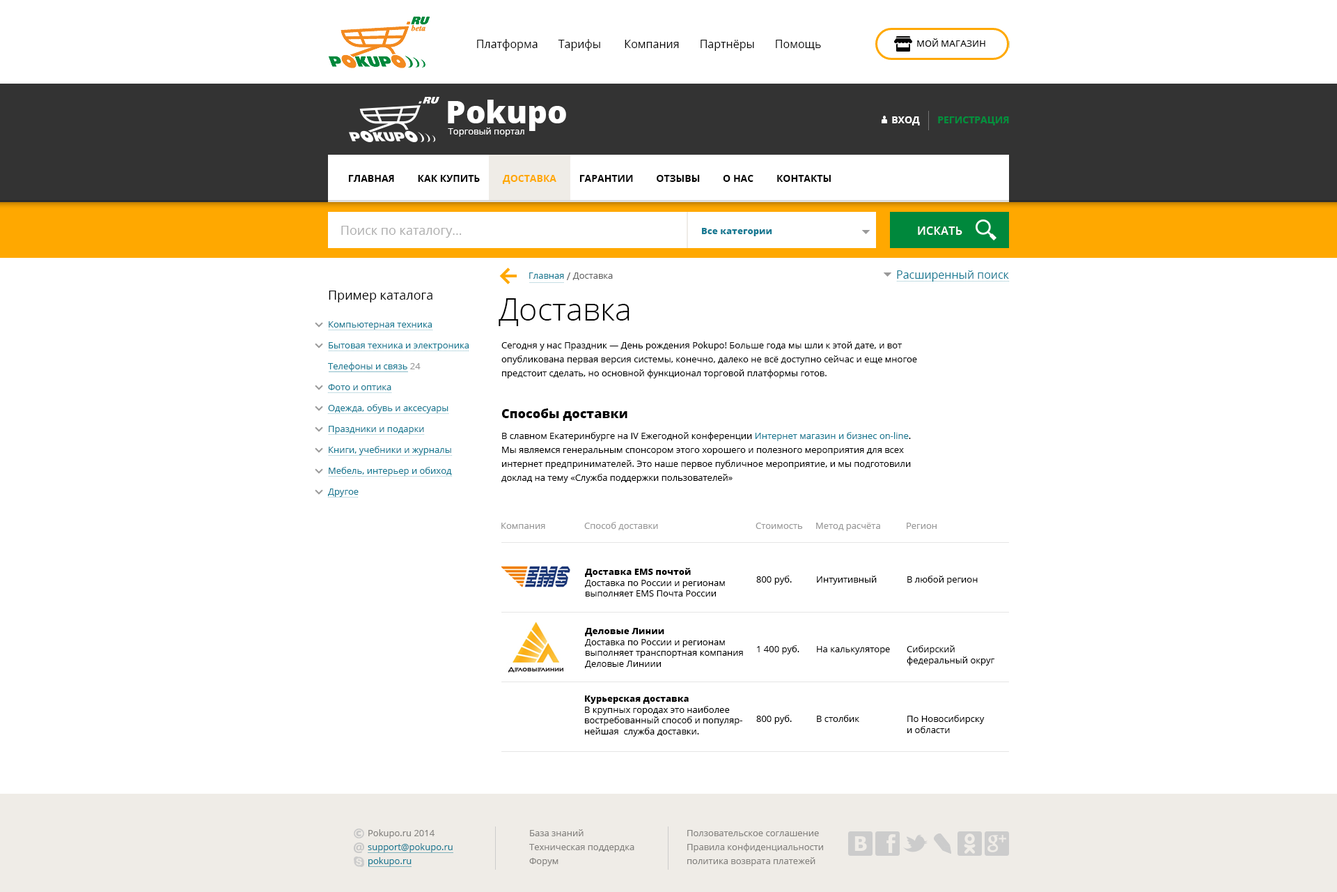
<style>
.page{position:relative;width:1337px;height:892px;background:#ffffff}
.page>*{position:absolute;margin:0}
.t1{font:11.1px "OpenSans";color:#010101}
.t2{font:9.1px "OpenSans";color:#ffffff}
.t3{font:31.3px "OpenSans-Extrabold";color:#ffffff}
.t4{font:9.8px "OpenSans-Bold";color:#02903d;text-transform:uppercase}
.t5{font:9.8px "OpenSans-Bold";color:#ffffff;text-transform:uppercase}
.t6{font:9.8px "OpenSans-Bold";color:#000000;text-transform:uppercase}
.t7{font:9.8px "OpenSans-Bold";color:#ffa800;text-transform:uppercase}
.t8{font:12.5px "OpenSans";color:#adadad}
.t9{font:9.1px "OpenSans-Extrabold";color:#177a93}
.t10{font:11.1px "OpenSans-Semibold";letter-spacing:0.025em;color:#ffffff;text-transform:uppercase}
.t11{font:9.1px "OpenSans";color:#666666}
.t12{font:9.1px "OpenSans";color:#177a93}
.t13{font:10.4px "OpenSans";color:#666666}
.t14{font:11.1px "OpenSans";color:#177a93}
.t15{font:12.5px "OpenSans";color:#000000}
.t16{font:31.3px "OpenSans-Light";color:#000000}
.t17{font:9.1px/20.9px "OpenSans";color:#177a93}
.t18{font:9.1px/20.9px "OpenSans";color:#999999}
.t19{font:9.1px/13.9px "OpenSans";color:#000000}
.t20{font:12.5px "OpenSans-Extrabold";color:#000000}
.t21{font:9.1px/13.9px "OpenSans";color:#177a93}
.t22{font:9.1px "OpenSans";color:#999999}
.t23{font:9.1px "OpenSans";color:#000000}
.t24{font:9.1px "OpenSans-Extrabold";color:#000000}
</style>
<div class="page">
<p class="t1" style="left:477px;top:39px;width:344px;height:12px">Платформа       Тарифы        Компания       Партнёры       Помощь</p>
<p class="t2" style="left:448px;top:100px;width:118px;height:37px"><span class="t3">Pokupo<br> </span>Торговый портал</p>
<p class="t4" style="left:892px;top:116px;width:117px;height:9px"><span class="t5">Вход       </span>регистрация</p>
<p class="t6" style="left:348px;top:175px;width:483px;height:9px">ГЛАВНАЯ         Как купить         <span class="t7">Доставка</span>         Гарантии         Отзывы         О нас         Контакты</p>
<p class="t8" style="left:341px;top:226px;width:121px;height:12px">Поиск по каталогу...</p>
<p class="t9" style="left:702px;top:228px;width:70px;height:8px">Все категории</p>
<p class="t10" style="left:918px;top:226px;width:45px;height:9px">искать</p>
<p class="t11" style="left:529px;top:272px;width:84px;height:8px"><span class="t12">Главная </span><span class="t13">/</span> Доставка</p>
<p class="t14" style="left:897px;top:270px;width:112px;height:11px">Расширенный поиск</p>
<p class="t15" style="left:329px;top:290px;width:104px;height:12px">Пример каталога</p>
<p class="t16" style="left:499px;top:298px;width:131px;height:28px">Доставка</p>
<p class="t17" style="left:328px;top:321px;width:141px;height:176px">Компьютерная техника<br>Бытовая техника и электроника<br>Телефоны и связь<span class="t18"> 24<br></span>Фото и оптика<br>Одежда, обувь и аксесуары<br>Праздники и подарки<br>Книги, учебники и журналы<br>Мебель, интерьер и обиход<br>Другое</p>
<p class="t19" style="left:502px;top:341px;width:415px;height:37px">Сегодня у нас Праздник — День рождения Pokupo! Больше года мы шли к этой дате, и вот опубликована первая версия системы, конечно, далеко не всё доступно сейчас и еще многое предстоит сделать, но основной функционал торговой платформы готов.</p>
<p class="t20" style="left:502px;top:408px;width:126px;height:13px">Способы доставки</p>
<p class="t19" style="left:502px;top:432px;width:409px;height:51px">В славном Екатеринбурге на IV Ежегодной конференции <span class="t21">Интернет магазин и бизнес on-line</span>. Мы являемся генеральным спонсором этого хорошего и полезного мероприятия для всех интернет предпринимателей. Это наше первое публичное мероприятие, и мы подготовили доклад на тему «Служба поддержки пользователей»</p>
<p class="t22" style="left:584px;top:522px;width:74px;height:8px">Способ доставки</p>
<p class="t22" style="left:502px;top:522px;width:43px;height:7px">Компания</p>
<p class="t22" style="left:756px;top:522px;width:47px;height:7px">Стоимость</p>
<p class="t22" style="left:816px;top:522px;width:64px;height:9px">Метод расчёта</p>
<p class="t22" style="left:907px;top:522px;width:30px;height:7px">Регион</p>
<p class="t23" style="left:585px;top:568px;width:140px;height:28px"><span class="t24">Доставка EMS почтой<br></span>Доставка по России и регионам<br>выполняет EMS Почта России</p>
<p class="t23" style="left:756px;top:575px;width:36px;height:9px">800 руб.</p>
<p class="t23" style="left:817px;top:575px;width:60px;height:9px">Интуитивный</p>
<p class="t23" style="left:908px;top:575px;width:70px;height:9px">В любой регион</p>
<p class="t23" style="left:585px;top:628px;width:158px;height:40px"><span class="t24">Деловые Линии<br></span>Доставка по России и регионам<br>выполняет транспортная компания<br>Деловые Линиии</p>
<p class="t23" style="left:757px;top:645px;width:43px;height:9px">1 400 руб.</p>
<p class="t23" style="left:817px;top:646px;width:73px;height:8px">На калькуляторе</p>
<p class="t23" style="left:907px;top:645px;width:88px;height:20px">Сибирский<br>федеральный округ</p>
<p class="t23" style="left:585px;top:695px;width:158px;height:41px"><span class="t24">Курьерская доставка<br></span>В крупных городах это наиболее <br>востребованный способ и популяр-<br>нейшая  служба доставки.</p>
<p class="t23" style="left:756px;top:715px;width:36px;height:9px">800 руб.</p>
<p class="t23" style="left:817px;top:715px;width:43px;height:7px">В столбик</p>
<p class="t23" style="left:908px;top:715px;width:77px;height:18px">По Новосибирску<br>и области</p>
</div>
